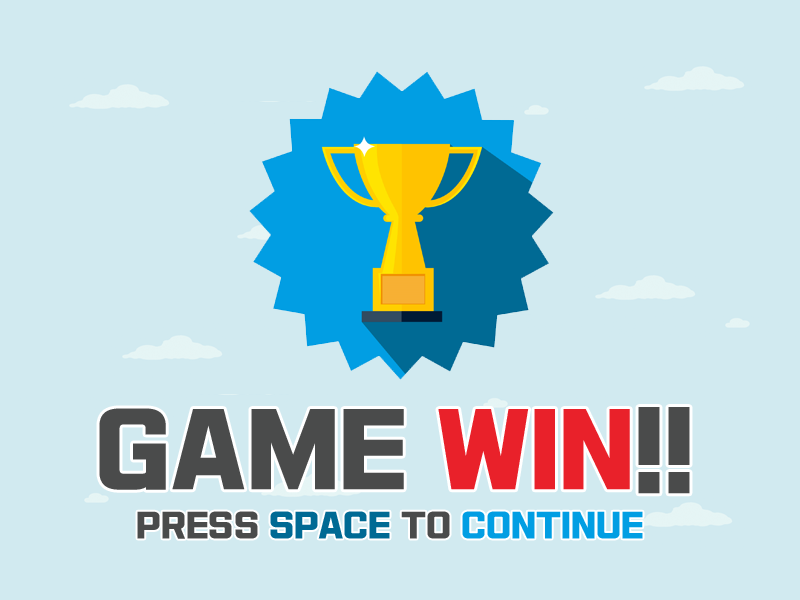
<style>
.page{position:relative;width:800px;height:600px;background:#d1eaf0}
.page>*{position:absolute;margin:0}
.t1{font:100px "Typo_SsangmunDong_B";color:#4a4b4b}
.t2{font:100px "Typo_SsangmunDong_B";color:#e9212a}
.t3{font:33.3px "Typo_SsangmunDong_B";color:#019ee3}
.t4{font:33.3px "Typo_SsangmunDong_B";color:#4a4b4b}
.t5{font:33.3px "Typo_SsangmunDong_B";color:#006a94}
</style>
<div class="page">
<p class="t1" style="left:99px;top:407px;width:591px;height:87px">GAME <span class="t2">WIN</span>!!</p>
<p class="t3" style="left:137px;top:511px;width:506px;height:28px"><span class="t4">PRESS </span><span class="t5">SPACE</span><span class="t4"> TO </span>CONTINUE</p>
</div>
